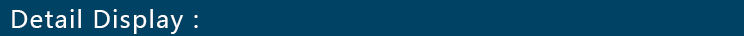
<style>
.page{position:relative;width:744px;height:36px;background:#004263}
.page>*{position:absolute;margin:0}
.t1{font:24px "MicrosoftYaHei";letter-spacing:0.05em;color:#ffffff}
</style>
<div class="page">
<p class="t1" style="left:12px;top:9px;width:186px;height:25px">Detail Display：</p>
</div>
